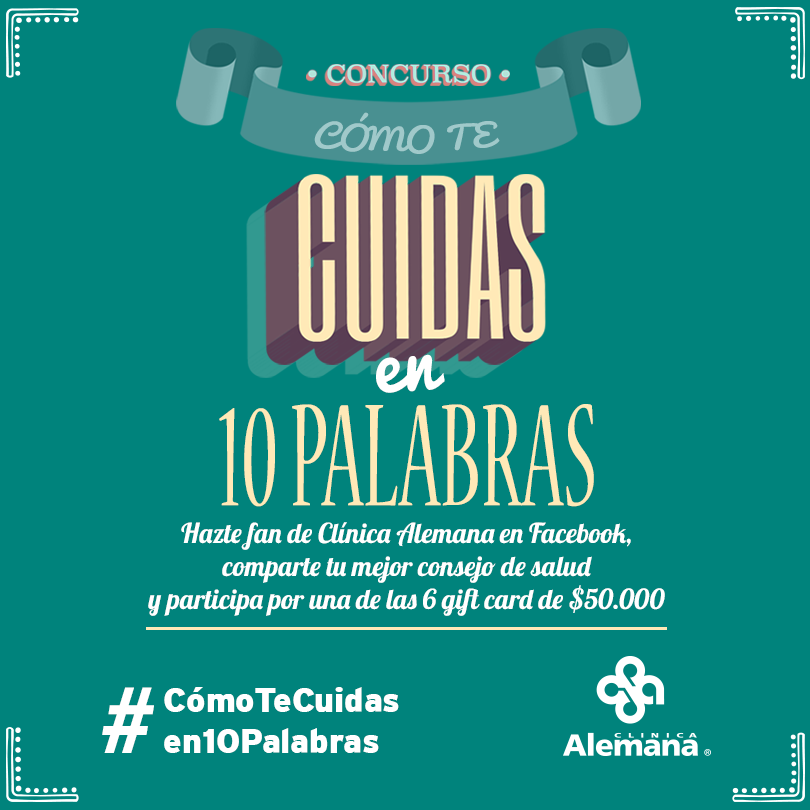
<style>
.page{position:relative;width:810px;height:810px;background:#00837c}
.page>*{position:absolute;margin:0}
.t1{font:29.4px "Pacifico-Regular";color:#a0c9ca;text-transform:uppercase;scale:1.17 1}
.t2{font:74.9px "Pacifico-Regular";letter-spacing:-0.002em;color:#ffffff}
.t3{font:161.9px "NuevaStd-Cond";letter-spacing:-0.002em;color:#ffe9b7;scale:0.6 1}
.t4{font:27.6px "Lobster-Regular";letter-spacing:-0.002em;color:#ffffff}
.t5{font:100.7px "MyriadPro-BoldIt";color:#ffffff}
.t6{font:33.9px "Interstate-Black";color:#ffffff}
</style>
<div class="page">
<p class="t1" style="left:314px;top:112px;width:186px;height:42px">cómo te</p>
<p class="t2" style="left:376px;top:354px;width:69px;height:39px;rotate:-4deg">en</p>
<p class="t3" style="left:219px;top:404px;width:375px;height:103px">10 PALABRAS</p>
<p class="t4" style="left:148px;top:522px;width:517px;height:94px;text-align:center">Hazte fan de Clínica Alemana en Facebook,<br>comparte tu mejor consejo de salud<br>y participa por una de las 6 gift card de $50.000</p>
<p class="t5" style="left:102px;top:687px;width:52px;height:66px">#</p>
<p class="t6" style="left:164px;top:687px;width:235px;height:66px">CómoTeCuidas<br>en10Palabras</p>
</div>
